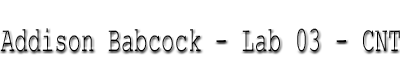
<style>
.page{position:relative;width:400px;height:75px;background:#ffffff}
.page>*{position:absolute;margin:0}
.t1{font:35.9px "CourierNewPSMT";color:#000000;scale:0.62 1}
</style>
<div class="page">
<p class="t1" style="left:0px;top:28px;width:400px;height:24px">Addison Babcock - Lab 03 - CNT</p>
</div>
